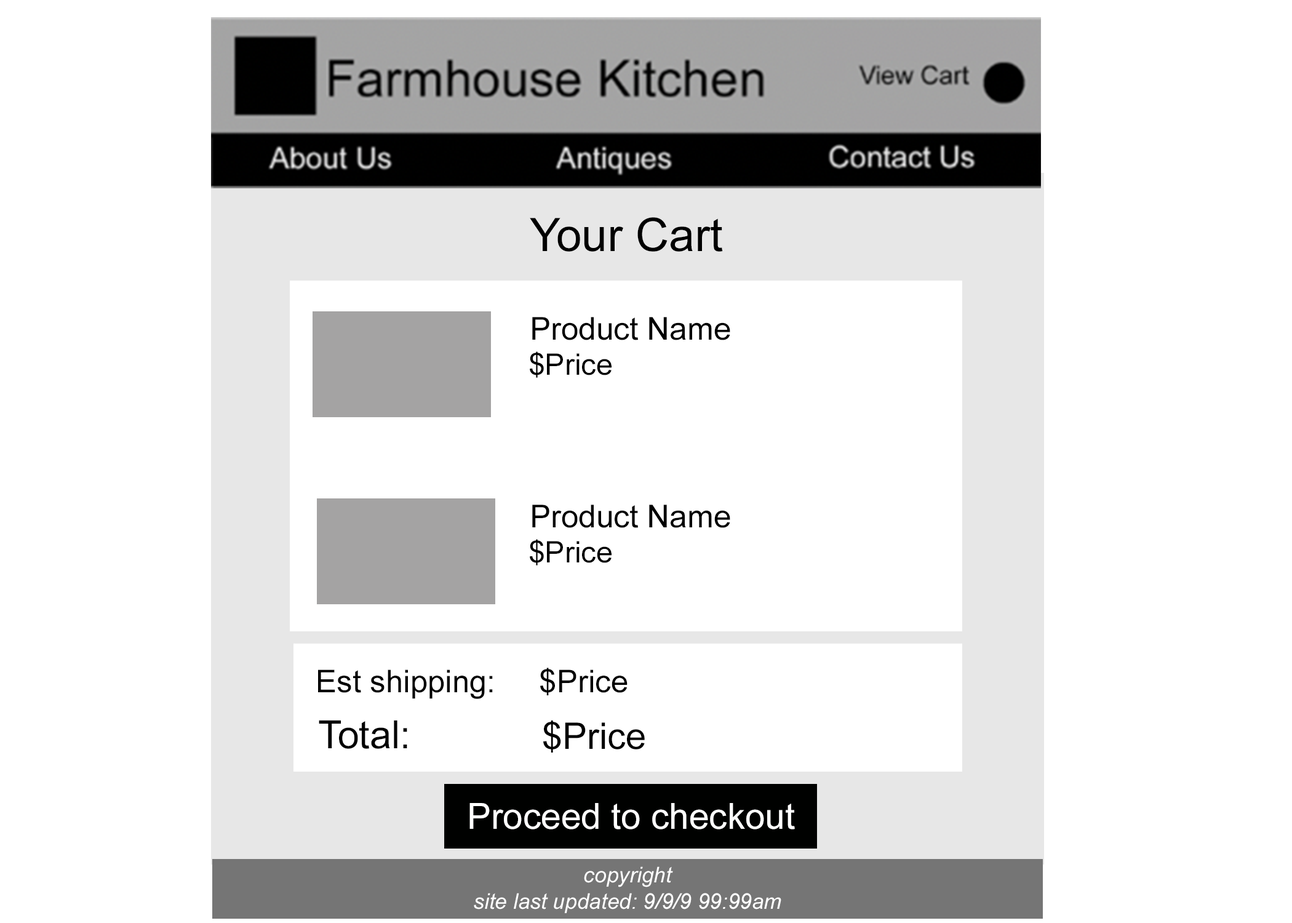
<style>
.page{position:relative;width:1292px;height:923px;background:#ffffff}
.page>*{position:absolute;margin:0}
.t1{font:46.1px "ArialMT";color:#000000}
.t2{font:31.5px "ArialMT";color:#000000}
.t3{font:29.7px "ArialMT";color:#000000}
.t4{font:31.4px "ArialMT";color:#000000}
.t5{font:38.7px "ArialMT";color:#000000}
.t6{font:36.5px "ArialMT";color:#000000}
.t7{font:36px "ArialMT";color:#ffffff}
.t8{font:21.7px "Arial-ItalicMT";color:#ffffff}
</style>
<div class="page">
<p class="t1" style="left:530px;top:217px;width:193px;height:35px">Your Cart</p>
<p class="t2" style="left:532px;top:317px;width:198px;height:23px">Product Name</p>
<p class="t3" style="left:530px;top:351px;width:82px;height:27px">$Price</p>
<p class="t2" style="left:532px;top:505px;width:198px;height:23px">Product Name</p>
<p class="t3" style="left:530px;top:539px;width:82px;height:26px">$Price</p>
<p class="t4" style="left:318px;top:668px;width:310px;height:31px">Est shipping:     $Price</p>
<p class="t5" style="left:319px;top:720px;width:88px;height:29px">Total:</p>
<p class="t6" style="left:543px;top:720px;width:102px;height:32px">$Price</p>
<p class="t7" style="left:469px;top:803px;width:326px;height:26px">Proceed to checkout</p>
<p class="t8" style="left:474px;top:866px;width:307px;height:47px;text-align:center">copyright<br>site last updated: 9/9/9 99:99am</p>
</div>
